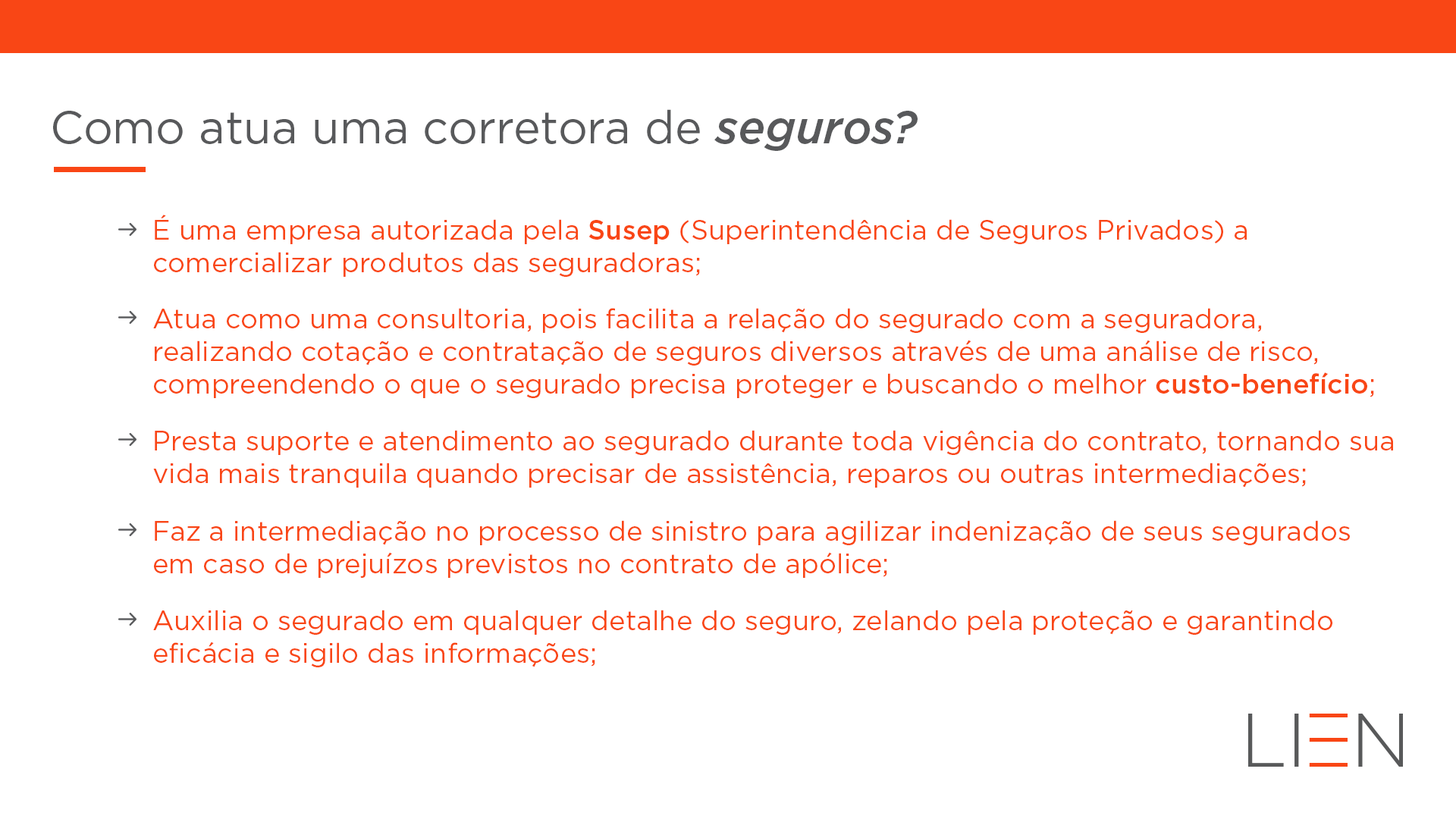
<style>
.page{position:relative;width:1456px;height:819px;background:#ffffff}
.page>*{position:absolute;margin:0}
.t1{font:45.5px "Gotham-Book";color:#58595b}
.t2{font:45.5px "Gotham-MediumItalic";color:#58595b}
.t3{font:27.3px "Gotham-Book";color:#f94615}
.t4{font:27.3px "Gotham-Medium";color:#f94615}
</style>
<div class="page">
<p class="t1" style="left:53px;top:109px;width:865px;height:42px">Como atua uma corretora de <span class="t2">seguros?</span></p>
<p class="t3" style="left:154px;top:215px;width:1093px;height:62px">É uma empresa autorizada pela <span class="t4">Susep</span> (Superintendência de Seguros Privados) a comercializar produtos das seguradoras;</p>
<p class="t3" style="left:153px;top:308px;width:1221px;height:90px">Atua como uma consultoria, pois facilita a relação do segurado com a seguradora, realizando cotação e contratação de seguros diversos através de uma análise de risco, compreendendo o que o segurado precisa proteger e buscando o melhor <span class="t4">custo-benefício</span>;</p>
<p class="t3" style="left:153px;top:430px;width:1240px;height:58px">Presta suporte e atendimento ao segurado durante toda vigência do contrato, tornando sua vida mais tranquila quando precisar de assistência, reparos ou outras intermediações;</p>
<p class="t3" style="left:154px;top:520px;width:1196px;height:58px">Faz a intermediação no processo de sinistro para agilizar indenização de seus segurados em caso de prejuízos previstos no contrato de apólice;</p>
<p class="t3" style="left:153px;top:610px;width:1179px;height:57px">Auxilia o segurado em qualquer detalhe do seguro, zelando pela proteção e garantindo eficácia e sigilo das informações;</p>
</div>
